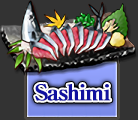
<style>
.page{position:relative;width:138px;height:120px;background:#333333}
.page>*{position:absolute;margin:0}
.t1{font:22px "RyuminPro-ExBold";letter-spacing:-0.08em;color:#11119f;font-weight:bold}
</style>
<div class="page">
<p class="t1" style="left:35px;top:84px;width:76px;height:17px">Sashimi</p>
</div>
